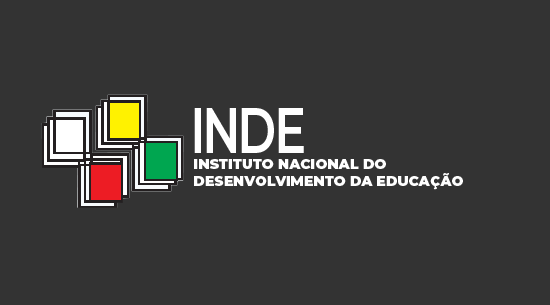
<style>
.page{position:relative;width:550px;height:305px;background:#333333}
.page>*{position:absolute;margin:0}
.t1{font:64px "Montserrat-SemiBold";letter-spacing:-0.06em;color:#ffffff;text-transform:uppercase;scale:0.74 1}
.t2{font:14px "Montserrat-Black";color:#ffffff;text-transform:uppercase}
</style>
<div class="page">
<p class="t1" style="left:194px;top:108px;width:110px;height:45px">INDE</p>
<p class="t2" style="left:194px;top:159px;width:269px;height:31px">Instituto Nacional do<br>Desenvolvimento da Educação</p>
</div>
